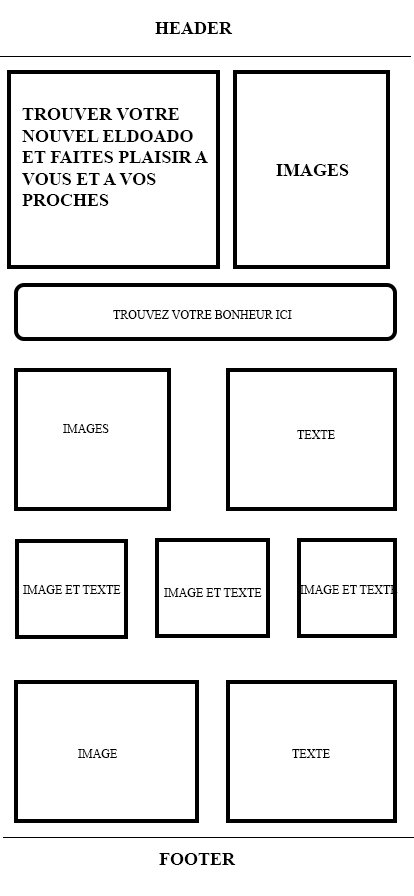
<style>
.page{position:relative;width:414px;height:896px;background:#ffffff}
.page>*{position:absolute;margin:0}
.t1{font:18px "TimesNewRomanPS-BoldMT";color:#000000}
.t2{font:12px "TimesNewRomanPSMT";color:#000000}
</style>
<div class="page">
<p class="t1" style="left:155px;top:22px;width:78px;height:12px">HEADER</p>
<p class="t1" style="left:22px;top:108px;width:186px;height:98px">TROUVER VOTRE <br>NOUVEL ELDOADO<br>ET FAITES PLAISIR A<br>VOUS ET A VOS <br>PROCHES</p>
<p class="t1" style="left:276px;top:164px;width:73px;height:12px">IMAGES</p>
<p class="t2" style="left:113px;top:310px;width:179px;height:9px">TROUVEZ VOTRE BONHEUR ICI</p>
<p class="t2" style="left:63px;top:424px;width:46px;height:9px">IMAGES</p>
<p class="t2" style="left:297px;top:430px;width:38px;height:9px">TEXTE</p>
<p class="t2" style="left:23px;top:585px;width:98px;height:9px">IMAGE ET TEXTE</p>
<p class="t2" style="left:164px;top:588px;width:98px;height:9px">IMAGE ET TEXTE</p>
<p class="t2" style="left:300px;top:585px;width:98px;height:9px">IMAGE ET TEXTE</p>
<p class="t2" style="left:78px;top:749px;width:40px;height:9px">IMAGE</p>
<p class="t2" style="left:292px;top:749px;width:38px;height:9px">TEXTE</p>
<p class="t1" style="left:159px;top:853px;width:77px;height:12px">FOOTER</p>
</div>
